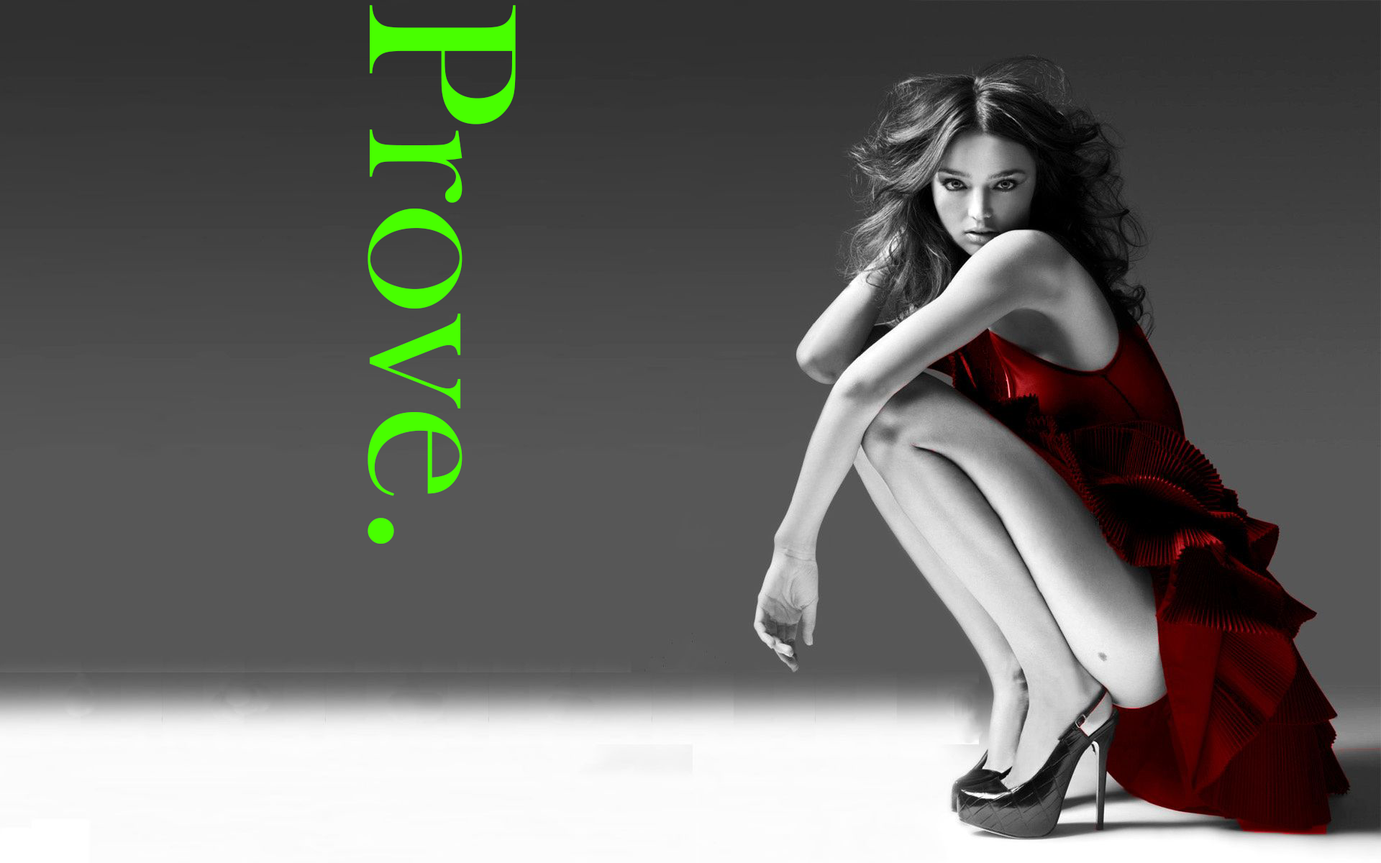
<style>
.page{position:relative;width:1381px;height:863px}
.page>*{position:absolute;margin:0}
.t1{font:218.4px "BaskOldFace";color:#48ff00}
</style>
<div class="page">
<p class="t1" style="left:368px;top:5px;width:148px;height:539px;rotate:90deg">Prove.</p>
</div>
